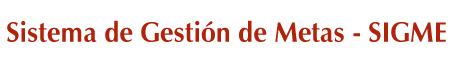
<style>
.page{position:relative;width:450px;height:59px;background:#ffffff}
.page>*{position:absolute;margin:0}
.t1{font:28px "ZapfHumanist601BT-Bold";color:#b2220a;scale:0.95 1}
</style>
<div class="page">
<p class="t1" style="left:7px;top:20px;width:439px;height:22px">Sistema de Gestión de Metas - SIGME</p>
</div>
